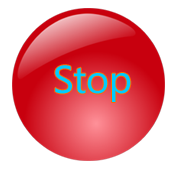
<style>
.page{position:relative;width:175px;height:169px;background:#ffffff}
.page>*{position:absolute;margin:0}
.t1{font:36px "MicrosoftYaHei";color:#00ccff}
</style>
<div class="page">
<p class="t1" style="left:55px;top:65px;width:76px;height:37px">Stop</p>
</div>
